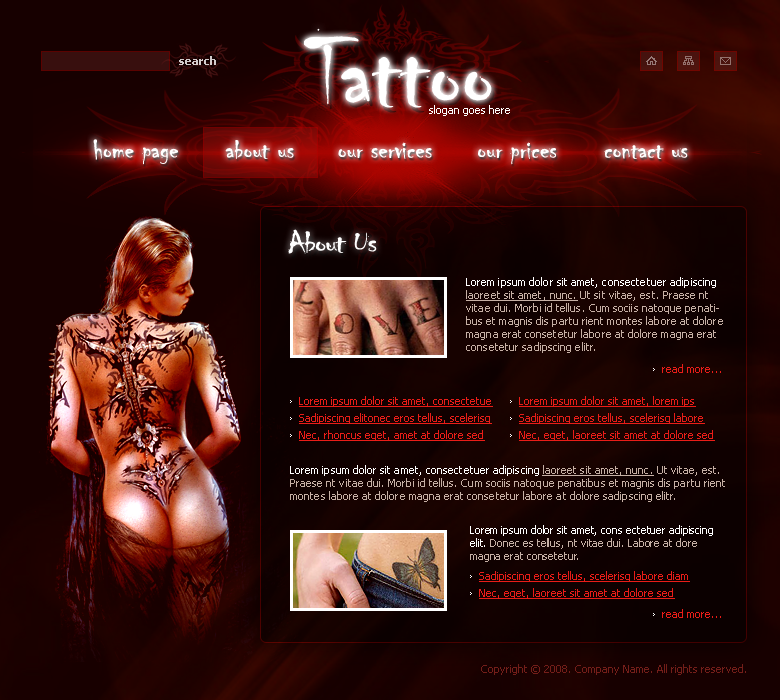
<style>
.page{position:relative;width:780px;height:700px}
.page>*{position:absolute;margin:0}
.t1{font:103.5px "Chiller-Regular";color:#ffffff}
.t2{font:11px "Tahoma-Bold";color:#d1cccc}
.t3{font:11px "Tahoma";color:#ffffff}
.t4{font:28px "Chiller-Regular";color:#ffffff}
.t5{font:32px "Chiller-Regular";letter-spacing:-0.04em;color:#ffffff;scale:1.14 1}
.t6{font:11px/13px "Tahoma";color:#c6b0a5}
.t7{font:11px/13px "Tahoma";color:#ffffff}
.t8{font:11px/13px "Tahoma";color:#c6b0a5;text-decoration:underline}
.t9{font:11px "Tahoma";color:#ea1d18}
.t10{font:11px "Tahoma";color:#ea1d18;text-decoration:underline}
.t11{font:11px "Tahoma";color:#741e19}
</style>
<div class="page">
<p class="t1" style="left:303px;top:28px;width:189px;height:80px">Tattoo</p>
<p class="t2" style="left:179px;top:56px;width:37px;height:9px">search</p>
<p class="t3" style="left:429px;top:105px;width:81px;height:11px">slogan goes here</p>
<p class="t4" style="left:93px;top:139px;width:85px;height:26px">home page</p>
<p class="t4" style="left:225px;top:140px;width:69px;height:19px">about us</p>
<p class="t4" style="left:338px;top:142px;width:94px;height:17px">our services</p>
<p class="t4" style="left:478px;top:142px;width:79px;height:23px">our prices</p>
<p class="t4" style="left:604px;top:145px;width:84px;height:14px">contact us</p>
<p class="t5" style="left:288px;top:229px;width:89px;height:25px">About Us</p>
<p class="t6" style="left:466px;top:277px;width:257px;height:76px"><span class="t7">Lorem ipsum dolor sit amet, consectetuer adipiscing </span><span class="t8">laoreet sit amet, nunc.</span> Ut sit vitae, est. Praese nt vitae dui. Morbi id tellus. Cum sociis natoque penatibus et magnis dis partu rient montes labore at dolore magna erat consetetur labore at dolore magna erat consetetur sadipscing elitr.</p>
<p class="t9" style="left:662px;top:364px;width:59px;height:9px">read more...</p>
<p class="t10" style="left:299px;top:396px;width:194px;height:11px">Lorem ipsum dolor sit amet, consectetue</p>
<p class="t10" style="left:519px;top:396px;width:177px;height:11px">Lorem ipsum dolor sit amet, lorem ips</p>
<p class="t10" style="left:299px;top:413px;width:193px;height:11px">Sadipiscing elitonec eros tellus, scelerisq</p>
<p class="t10" style="left:519px;top:413px;width:186px;height:11px">Sadipiscing eros tellus, scelerisq labore</p>
<p class="t10" style="left:299px;top:430px;width:186px;height:11px">Nec, rhoncus eget, amet at dolore sed</p>
<p class="t10" style="left:519px;top:430px;width:196px;height:11px">Nec, eget, laoreet sit amet at dolore sed</p>
<p class="t6" style="left:290px;top:465px;width:435px;height:37px"><span class="t7">Lorem ipsum dolor sit amet, consectetuer adipiscing </span><span class="t8">laoreet sit amet, nunc.</span> Ut vitae, est. Praese nt vitae dui. Morbi id tellus. Cum sociis natoque penatibus et magnis dis partu rient montes labore at dolore magna erat consetetur labore at dolore sadipscing elitr.</p>
<p class="t6" style="left:470px;top:525px;width:243px;height:37px"><span class="t7">Lorem ipsum dolor sit amet, cons ectetuer adipiscing elit. </span>Donec es tellus, nt vitae dui. Labore at dore magna erat consetetur.</p>
<p class="t10" style="left:479px;top:571px;width:211px;height:11px">Sadipiscing eros tellus, scelerisq labore diam</p>
<p class="t10" style="left:479px;top:588px;width:196px;height:11px">Nec, eget, laoreet sit amet at dolore sed</p>
<p class="t9" style="left:662px;top:609px;width:59px;height:9px">read more...</p>
<p class="t11" style="left:481px;top:664px;width:265px;height:11px">Copyright © 2008. Company Name. All rights reserved.</p>
</div>
